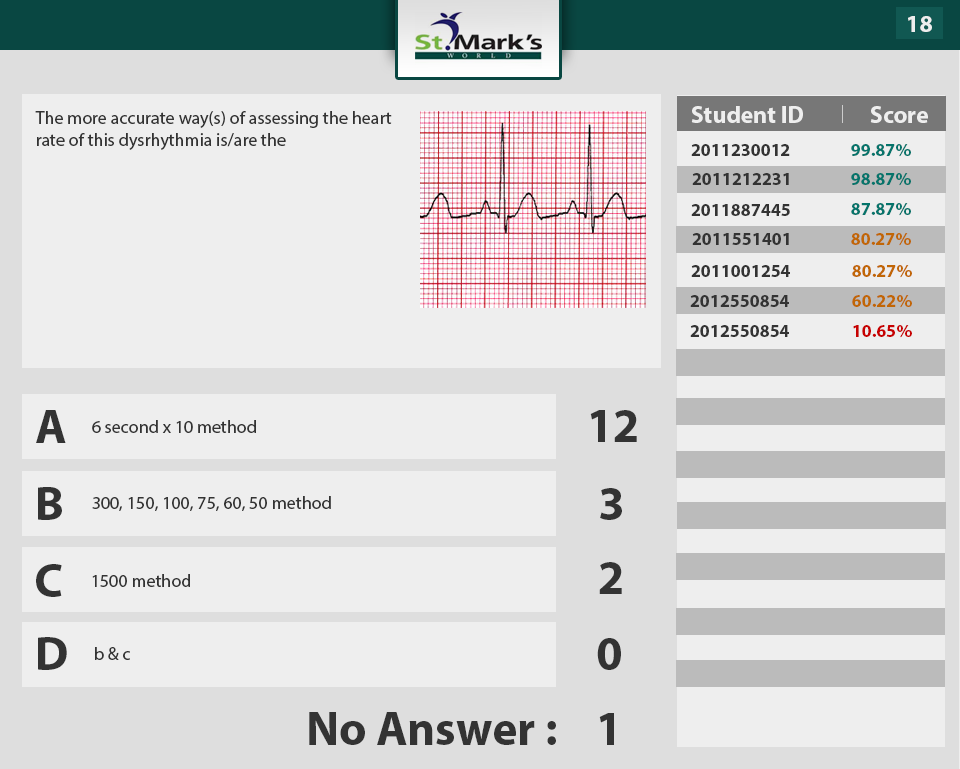
<style>
.page{position:relative;width:960px;height:769px;background:#eeeeee}
.page>*{position:absolute;margin:0}
.t1{font:24px "MyriadPro-Bold";color:#eeeeee}
.t2{font:18px "MyriadPro-Regular";color:#333333}
.t3{font:18px "MyriadPro-Bold";color:#333333}
.t4{font:18px "MyriadPro-Bold";color:#05746b}
.t5{font:18px "MyriadPro-Bold";color:#c16605}
.t6{font:18px "MyriadPro-Bold";color:#c60202}
.t7{font:48px "MyriadPro-Bold";color:#333333}
</style>
<div class="page">
<p class="t1" style="left:908px;top:16px;width:24px;height:16px">18</p>
<p class="t2" style="left:35px;top:111px;width:357px;height:39px">The more accurate way(s) of assessing the heart <br>rate of this dysrhythmia is/are the</p>
<p class="t1" style="left:691px;top:106px;width:112px;height:17px">Student ID</p>
<p class="t1" style="left:870px;top:106px;width:58px;height:17px">Score</p>
<p class="t3" style="left:691px;top:144px;width:99px;height:12px">2011230012</p>
<p class="t4" style="left:851px;top:144px;width:60px;height:13px">99.87%</p>
<p class="t3" style="left:692px;top:173px;width:97px;height:12px">2011212231</p>
<p class="t4" style="left:851px;top:173px;width:60px;height:13px">98.87%</p>
<p class="t3" style="left:691px;top:204px;width:99px;height:12px">2011887445</p>
<p class="t4" style="left:851px;top:203px;width:60px;height:13px">87.87%</p>
<p class="t3" style="left:692px;top:233px;width:97px;height:12px">2011551401</p>
<p class="t5" style="left:851px;top:233px;width:60px;height:13px">80.27%</p>
<p class="t3" style="left:691px;top:265px;width:99px;height:12px">2011001254</p>
<p class="t5" style="left:852px;top:265px;width:60px;height:13px">80.27%</p>
<p class="t3" style="left:690px;top:295px;width:99px;height:12px">2012550854</p>
<p class="t5" style="left:852px;top:295px;width:60px;height:13px">60.22%</p>
<p class="t3" style="left:690px;top:325px;width:99px;height:12px">2012550854</p>
<p class="t6" style="left:853px;top:325px;width:59px;height:13px">10.65%</p>
<p class="t7" style="left:36px;top:410px;width:30px;height:33px">A</p>
<p class="t7" style="left:590px;top:410px;width:47px;height:32px">12</p>
<p class="t2" style="left:92px;top:420px;width:164px;height:13px">6 second x 10 method</p>
<p class="t7" style="left:38px;top:487px;width:24px;height:33px">B</p>
<p class="t2" style="left:92px;top:496px;width:239px;height:15px">300, 150, 100, 75, 60, 50 method</p>
<p class="t7" style="left:600px;top:488px;width:22px;height:32px">3</p>
<p class="t7" style="left:36px;top:564px;width:26px;height:33px">C</p>
<p class="t7" style="left:599px;top:562px;width:23px;height:32px">2</p>
<p class="t2" style="left:92px;top:574px;width:98px;height:13px">1500 method</p>
<p class="t7" style="left:38px;top:637px;width:29px;height:33px">D</p>
<p class="t7" style="left:597px;top:638px;width:24px;height:32px">0</p>
<p class="t2" style="left:95px;top:647px;width:35px;height:13px">b &amp; c</p>
<p class="t7" style="left:309px;top:712px;width:247px;height:33px">No Answer :</p>
<p class="t7" style="left:599px;top:713px;width:15px;height:32px">1</p>
</div>
